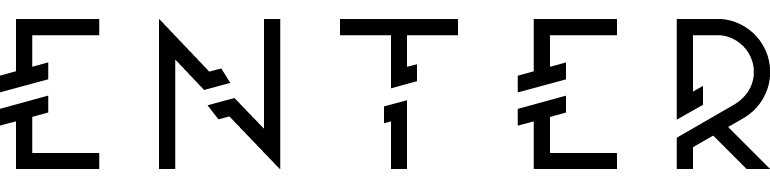
<style>
.page{position:relative;width:770px;height:195px;background:#ffffff}
.page>*{position:absolute;margin:0}
.t1{font:200px "Moondance";letter-spacing:0.2em;color:#000000}
</style>
<div class="page">
<p class="t1" style="left:0px;top:19px;width:770px;height:150px">ENTER</p>
</div>
